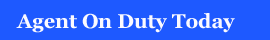
<style>
.page{position:relative;width:270px;height:40px;background:#1e59ff}
.page>*{position:absolute;margin:0}
.t1{font:20px "Georgia-Bold";color:#fbfaff}
</style>
<div class="page">
<p class="t1" style="left:16px;top:13px;width:219px;height:20px">Agent On Duty Today</p>
</div>
